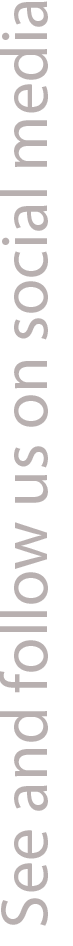
<style>
.page{position:relative;width:73px;height:946px;background:#ffffff}
.page>*{position:absolute;margin:0}
.t1{font:66.7px "MyriadPro-Regular";color:#b9b0b0}
</style>
<div class="page">
<p class="t1" style="left:0px;top:1px;width:48px;height:925px;rotate:-90deg">See and follow us on social media</p>
</div>
